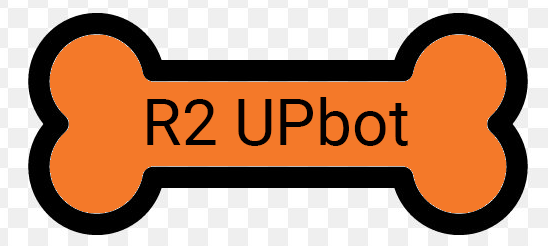
<style>
.page{position:relative;width:548px;height:246px;background:#f47929}
.page>*{position:absolute;margin:0}
.t1{font:63.9px "Roboto-Regular";color:#030000}
</style>
<div class="page">
<p class="t1" style="left:147px;top:97px;width:261px;height:49px">R2 UPbot</p>
</div>
